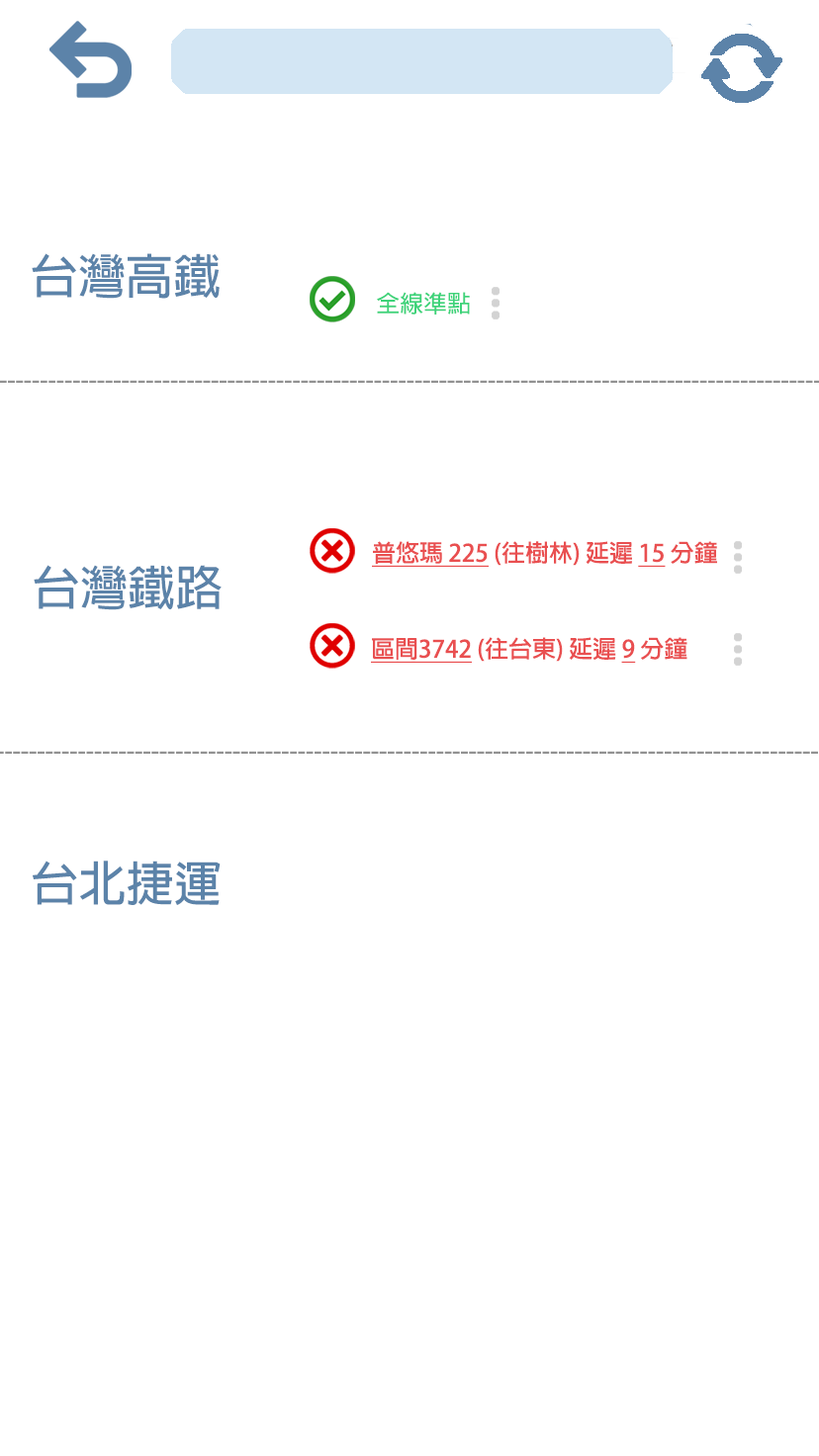
<style>
.page{position:relative;width:819px;height:1456px;background:#ffffff}
.page>*{position:absolute;margin:0}
.t1{font:47.6px "AdobeFanHeitiStd-Bold";color:#5c83a9}
.t2{font:23.7px "AdobeFanHeitiStd-Bold";color:#3ed37a}
.t3{font:23.7px "AdobeFanHeitiStd-Bold";color:#e94f50}
.t4{font:23.7px "AdobeFanHeitiStd-Bold";color:#e94f50;text-decoration:underline}
</style>
<div class="page">
<p class="t1" style="left:32px;top:253px;width:188px;height:46px">台灣高鐵</p>
<p class="t2" style="left:377px;top:292px;width:93px;height:23px">全線準點</p>
<p class="t3" style="left:372px;top:541px;width:345px;height:26px"><span class="t4">普悠瑪 225</span> (往樹林) 延遲 <span class="t4">15</span> 分鐘</p>
<p class="t1" style="left:34px;top:565px;width:188px;height:45px">台灣鐵路</p>
<p class="t3" style="left:371px;top:637px;width:316px;height:26px"><span class="t4">區間3742</span> (往台東) 延遲 <span class="t4">9</span> 分鐘</p>
<p class="t1" style="left:33px;top:861px;width:188px;height:44px">台北捷運</p>
</div>
